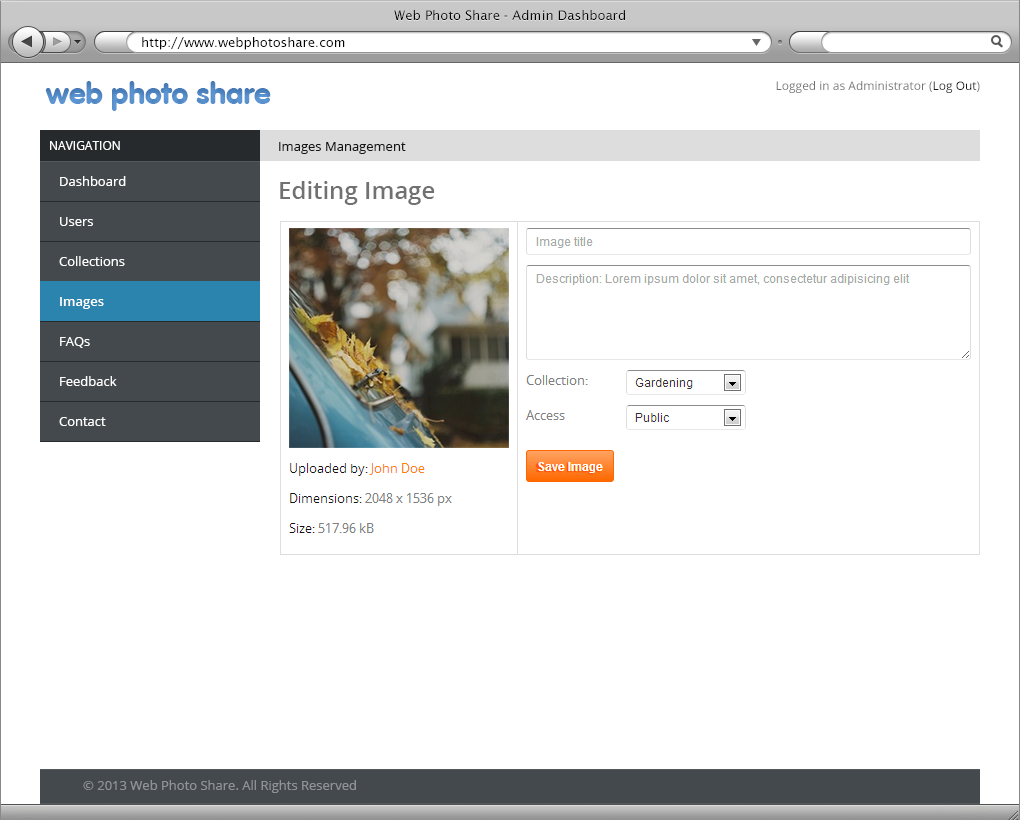
<style>
.page{position:relative;width:1020px;height:820px;background:#ffffff}
.page>*{position:absolute;margin:0}
.t1{font:13px "LucidaSans";color:#000000}
.t2{font:30px "VAGRounded-Black";color:#619bd7}
.t3{font:12px "OpenSans";color:#717171}
.t4{font:12px "OpenSans";color:#171717}
.t5{font:12px "OpenSans";color:#ffffff}
.t6{font:13px "OpenSans";color:#171717}
.t7{font:13px/40px "OpenSans";color:#ffffff}
.t8{font:24px "OpenSans-Semibold";color:#717171}
.t9{font:13px "OpenSans-Semibold";color:#ffffff}
.t10{font:13px "OpenSans";color:#909294}
</style>
<div class="page">
<p class="t1" style="left:394px;top:10px;width:231px;height:11px">Web Photo Share - Admin Dashboard</p>
<p class="t1" style="left:142px;top:37px;width:203px;height:13px">http://www.webphotoshare.com</p>
<p class="t2" style="left:45px;top:81px;width:226px;height:30px">web photo share</p>
<p class="t3" style="left:776px;top:81px;width:204px;height:12px">Logged in as Administrator (<span class="t4">Log Out</span>)</p>
<p class="t5" style="left:50px;top:141px;width:70px;height:9px">NAVIGATION</p>
<p class="t6" style="left:279px;top:142px;width:127px;height:12px">Images Management</p>
<p class="t7" style="left:59px;top:176px;width:67px;height:250px;text-align:justify">Dashboard<br>Users<br>Collections<br>Images<br>FAQs<br>Feedback<br>Contact</p>
<p class="t8" style="left:280px;top:181px;width:155px;height:24px">Editing Image</p>
<p class="t9" style="left:60px;top:297px;width:44px;height:12px">Images</p>
<p class="t10" style="left:83px;top:780px;width:273px;height:13px">© 2013 Web Photo Share. All Rights Reserved</p>
</div>
